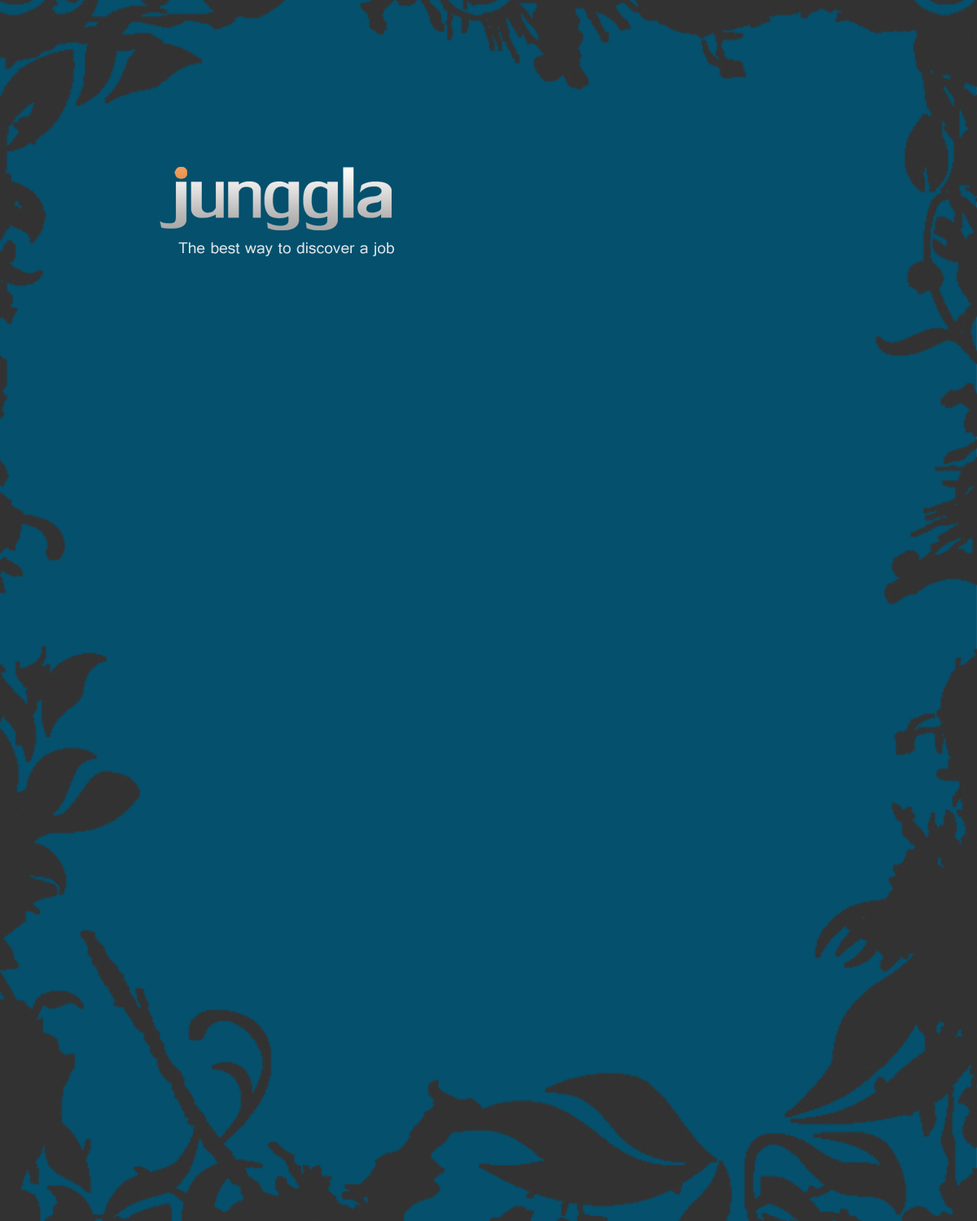
<style>
.page{position:relative;width:977px;height:1221px;background:#04506d}
.page>*{position:absolute;margin:0}
.t1{font:16.2px "Gautami";color:#dde3e5;scale:1.04 1}
</style>
<div class="page">
<p class="t1" style="left:178px;top:242px;width:216px;height:14px">The best way to discover a job</p>
</div>
